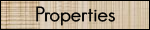
<style>
.page{position:relative;width:150px;height:30px}
.page>*{position:absolute;margin:0}
.t1{font:20px "GeosansLight";color:#000000;font-weight:bold}
</style>
<div class="page">
<p class="t1" style="left:36px;top:6px;width:79px;height:20px">Properties</p>
</div>
